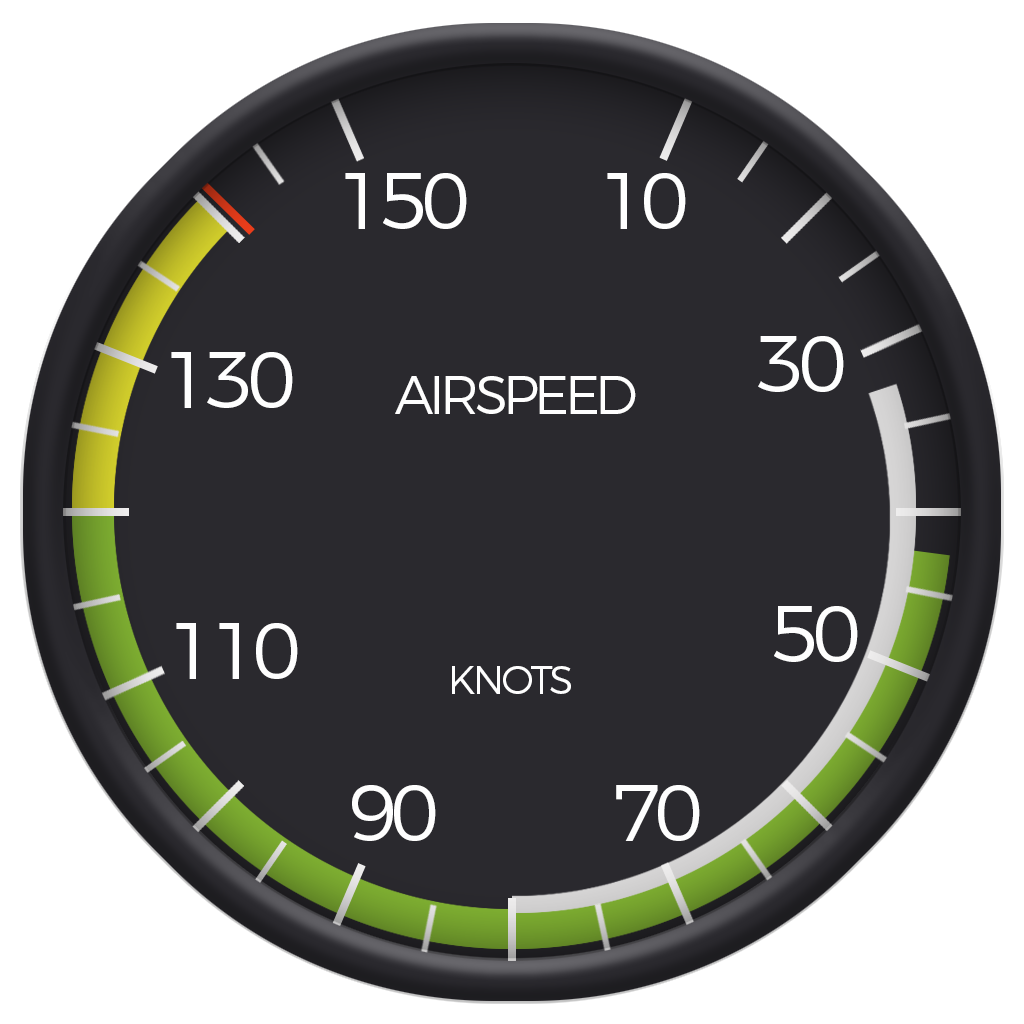
<style>
.page{position:relative;width:1024px;height:1024px;background:#2a292e}
.page>*{position:absolute;margin:0}
.t1{font:80px "Montserrat-Light";letter-spacing:-0.085em;color:#fefefe}
.t2{font:53.7px "Montserrat-Light";letter-spacing:-0.085em;color:#fefefe}
.t3{font:40px "Montserrat-Light";letter-spacing:-0.085em;color:#fefefe}
</style>
<div class="page">
<p class="t1" style="left:345px;top:173px;width:122px;height:56px">150</p>
<p class="t1" style="left:607px;top:173px;width:79px;height:56px">10</p>
<p class="t1" style="left:758px;top:336px;width:86px;height:56px">30</p>
<p class="t1" style="left:171px;top:352px;width:122px;height:56px">130</p>
<p class="t2" style="left:395px;top:376px;width:241px;height:38px">AIRSPEED</p>
<p class="t1" style="left:774px;top:606px;width:84px;height:56px">50</p>
<p class="t1" style="left:176px;top:623px;width:122px;height:56px">110</p>
<p class="t3" style="left:452px;top:666px;width:119px;height:28px">KNOTS</p>
<p class="t1" style="left:352px;top:785px;width:84px;height:56px">90</p>
<p class="t1" style="left:616px;top:785px;width:84px;height:56px">70</p>
</div>
